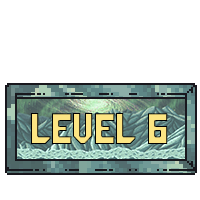
<style>
.page{position:relative;width:200px;height:200px;background:#ffffff}
.page>*{position:absolute;margin:0}
.t1{font:34.9px "GalacticaGridRegular";color:#fce583;scale:0.97 1}
</style>
<div class="page">
<p class="t1" style="left:31px;top:113px;width:137px;height:31px">Level 6</p>
</div>
